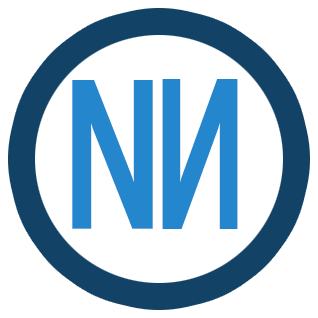
<style>
.page{position:relative;width:318px;height:318px;background:#ffffff}
.page>*{position:absolute;margin:0}
.t1{font:212.4px "SegoeUI-Bold";color:#2487ce;scale:0.6 1}
.t2{font:213.9px "SegoeUI-Bold";color:#2487ce;scale:0.56 1}
</style>
<div class="page">
<p class="t1" style="left:72px;top:80px;width:81px;height:149px">N</p>
<p class="t2" style="left:162px;top:79px;width:76px;height:150px;rotate:180deg">N</p>
</div>
